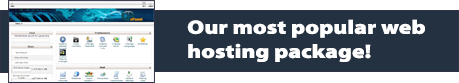
<style>
.page{position:relative;width:459px;height:83px;background:#243141}
.page>*{position:absolute;margin:0}
.t1{font:19.5px/24.1px "MyriadPro-Black";color:#ffffff;scale:1.2 1}
</style>
<div class="page">
<p class="t1" style="left:187px;top:19px;width:238px;height:43px">Our most popular web<br>hosting package!</p>
</div>
